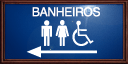
<style>
.page{position:relative;width:128px;height:64px}
.page>*{position:absolute;margin:0}
.t1{font:12px "Helvetica";letter-spacing:-0.019em;color:#ffffff}
</style>
<div class="page">
<p class="t1" style="left:32px;top:7px;width:68px;height:10px">BANHEIROS</p>
</div>
